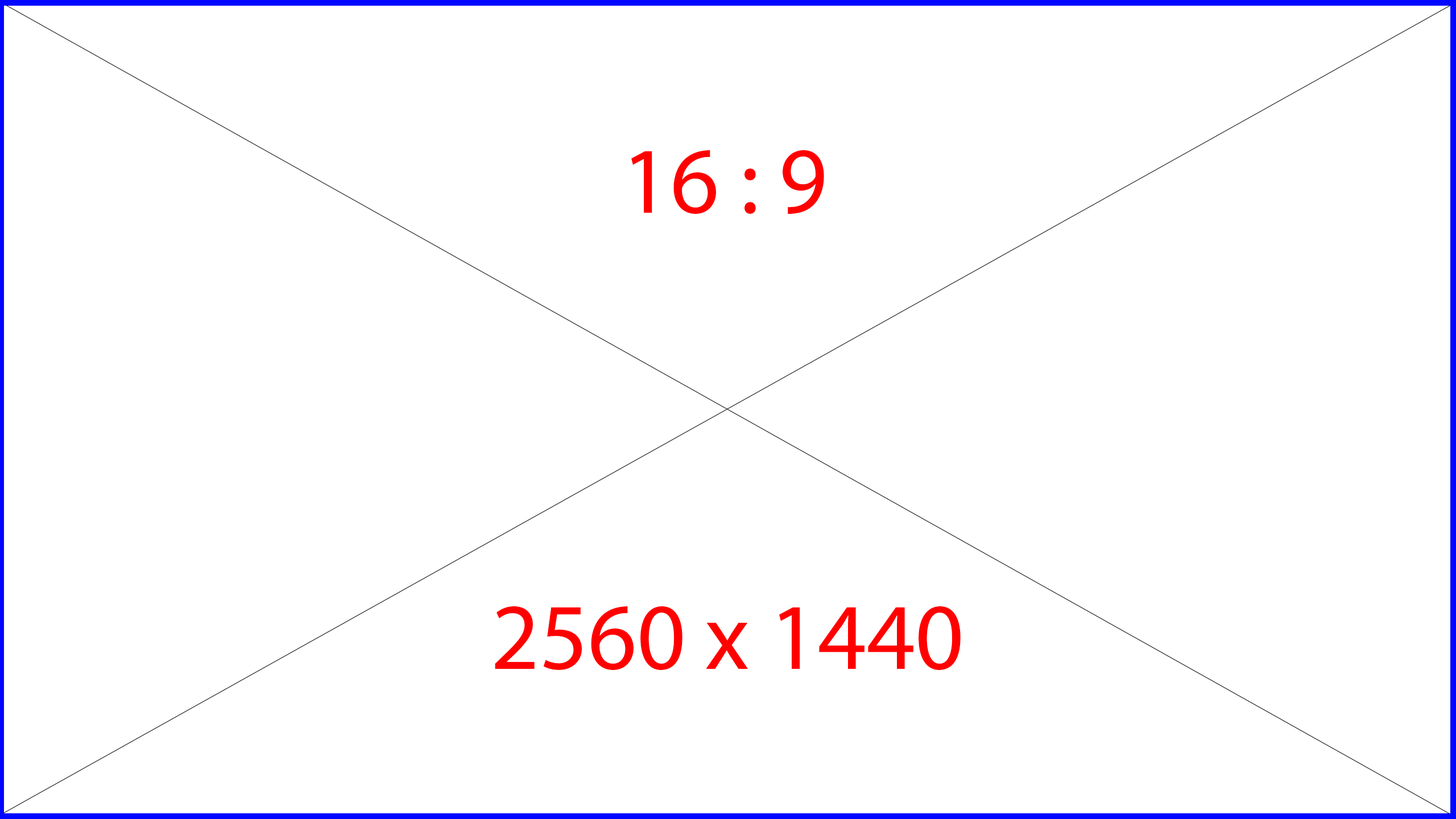
<style>
.page{position:relative;width:1456px;height:819px;background:#ffffff}
.page>*{position:absolute;margin:0}
.t1{font:94.8px "MyriadPro-Regular";color:#ff0000}
</style>
<div class="page">
<p class="t1" style="left:631px;top:150px;width:193px;height:64px">16 : 9</p>
<p class="t1" style="left:495px;top:606px;width:466px;height:65px">2560 x 1440</p>
</div>
